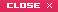
<style>
.page{position:relative;width:58px;height:12px}
.page>*{position:absolute;margin:0}
.t1{font:8px "Hooge0553";color:#ffffff;font-weight:bold}
</style>
<div class="page">
<p class="t1" style="left:7px;top:3px;width:33px;height:5px">CLOSE</p>
</div>
